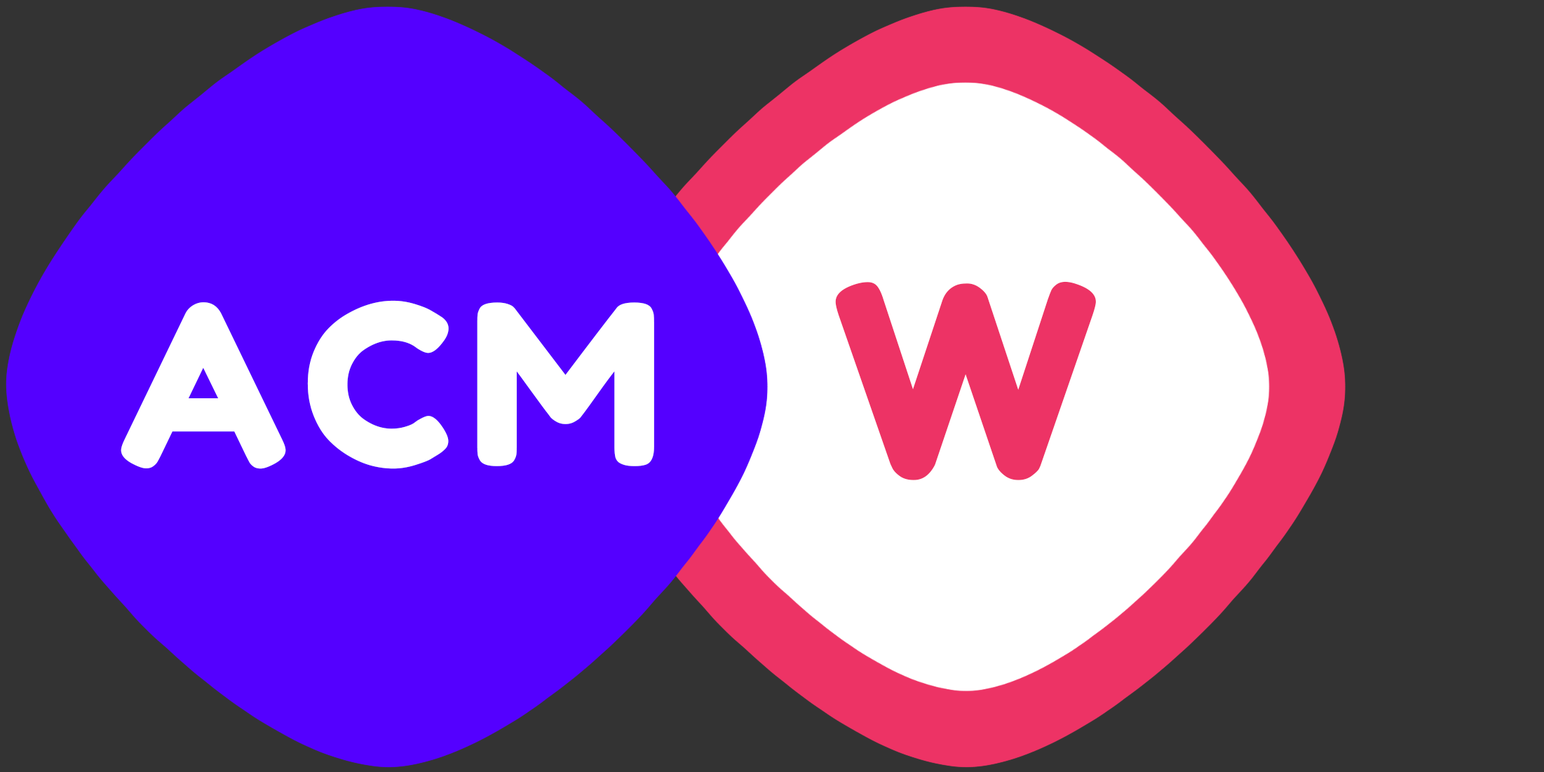
<style>
.page{position:relative;width:1544px;height:772px;background:#333333}
.page>*{position:absolute;margin:0}
.t1{font:268.8px "FredokaOne-Regular";letter-spacing:0.06em;color:#ed3365}
.t2{font:224px "FredokaOne-Regular";letter-spacing:0.06em;color:#ffffff}
</style>
<div class="page">
<p class="t1" style="left:835px;top:281px;width:261px;height:199px">W</p>
<p class="t2" style="left:121px;top:300px;width:533px;height:169px">ACM</p>
</div>
